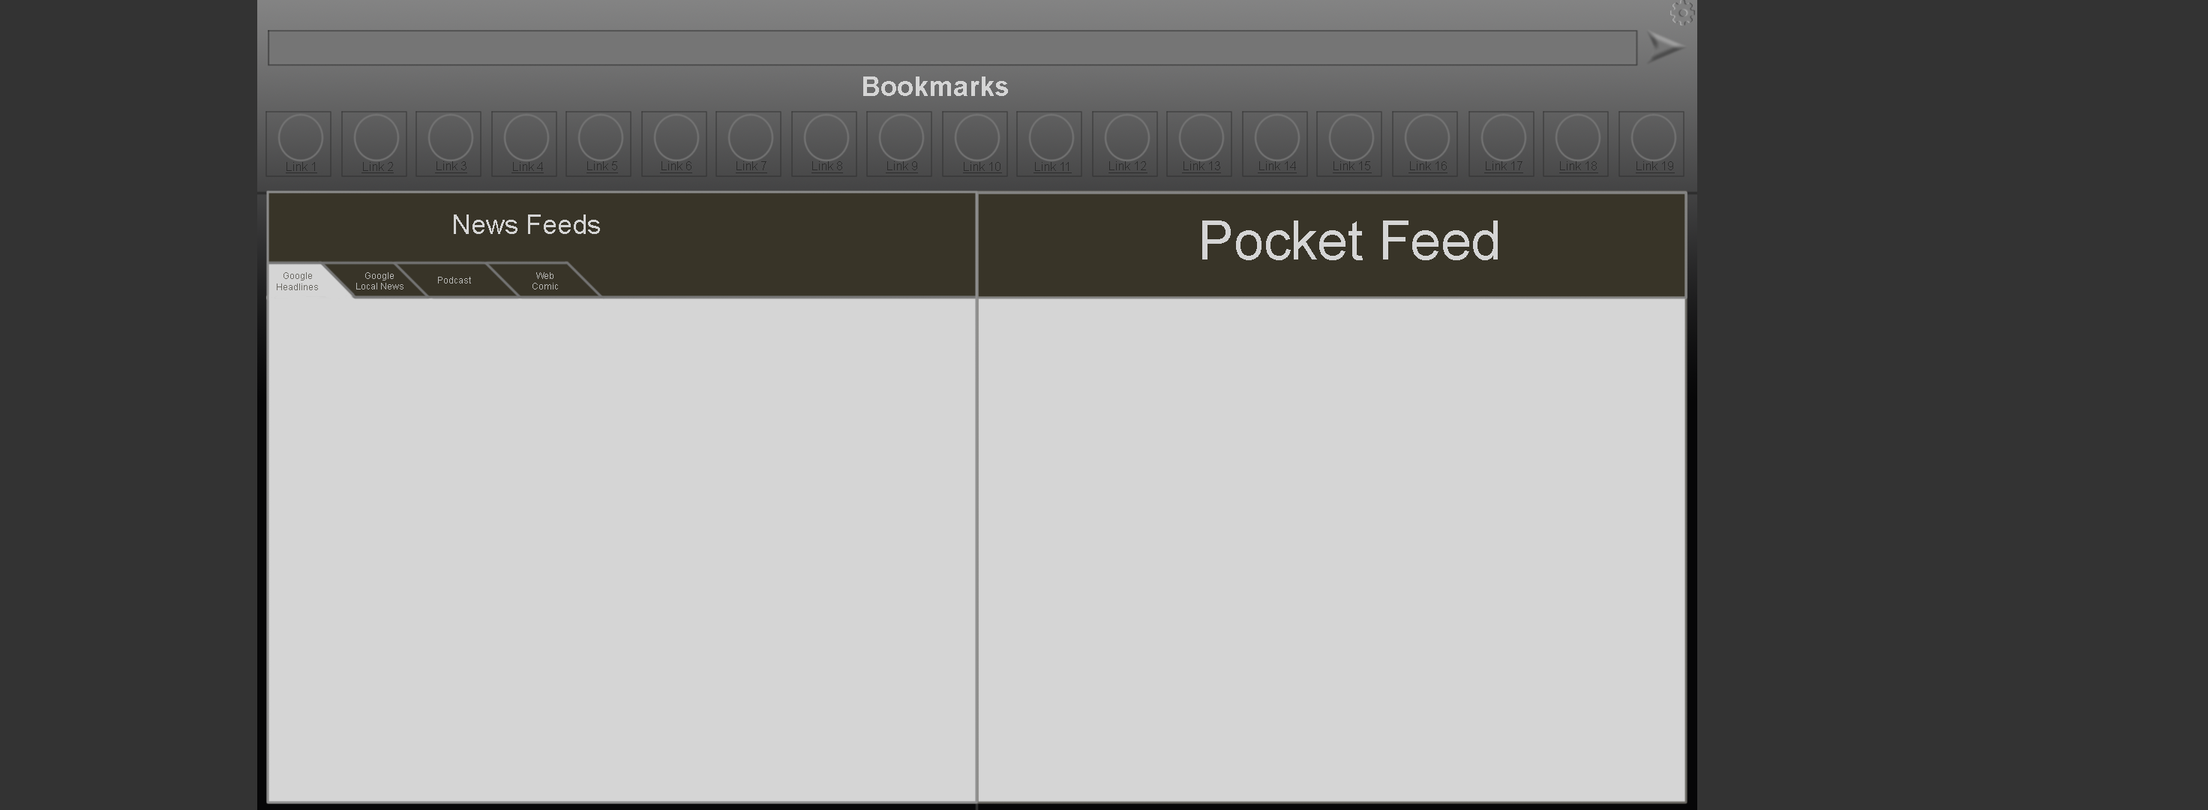
<style>
.page{position:relative;width:2208px;height:810px;background:#d5d5d5}
.page>*{position:absolute;margin:0}
.t1{font:27px "Arial-BoldMT";color:#d5d5d5}
.t2{font:27px "ArialMT";color:#d5d5d5}
.t3{font:54px "ArialMT";color:#d5d5d5}
.t4{font:9px "ArialMT";color:#6c6a64}
.t5{font:9px "ArialMT";color:#b6b6b4}
</style>
<div class="page">
<p class="t1" style="left:863px;top:76px;width:145px;height:20px">Bookmarks</p>
<p class="t2" style="left:454px;top:214px;width:146px;height:20px">News Feeds</p>
<p class="t3" style="left:1202px;top:220px;width:296px;height:40px">Pocket Feed</p>
<p class="t4" style="left:277px;top:272px;width:41px;height:18px;text-align:center">Google<br>Headlines</p>
<p class="t5" style="left:356px;top:272px;width:48px;height:18px;text-align:center">Google<br>Local News</p>
<p class="t5" style="left:438px;top:277px;width:33px;height:7px">Podcast</p>
<p class="t5" style="left:532px;top:272px;width:26px;height:18px;text-align:center">Web<br>Comic</p>
</div>
